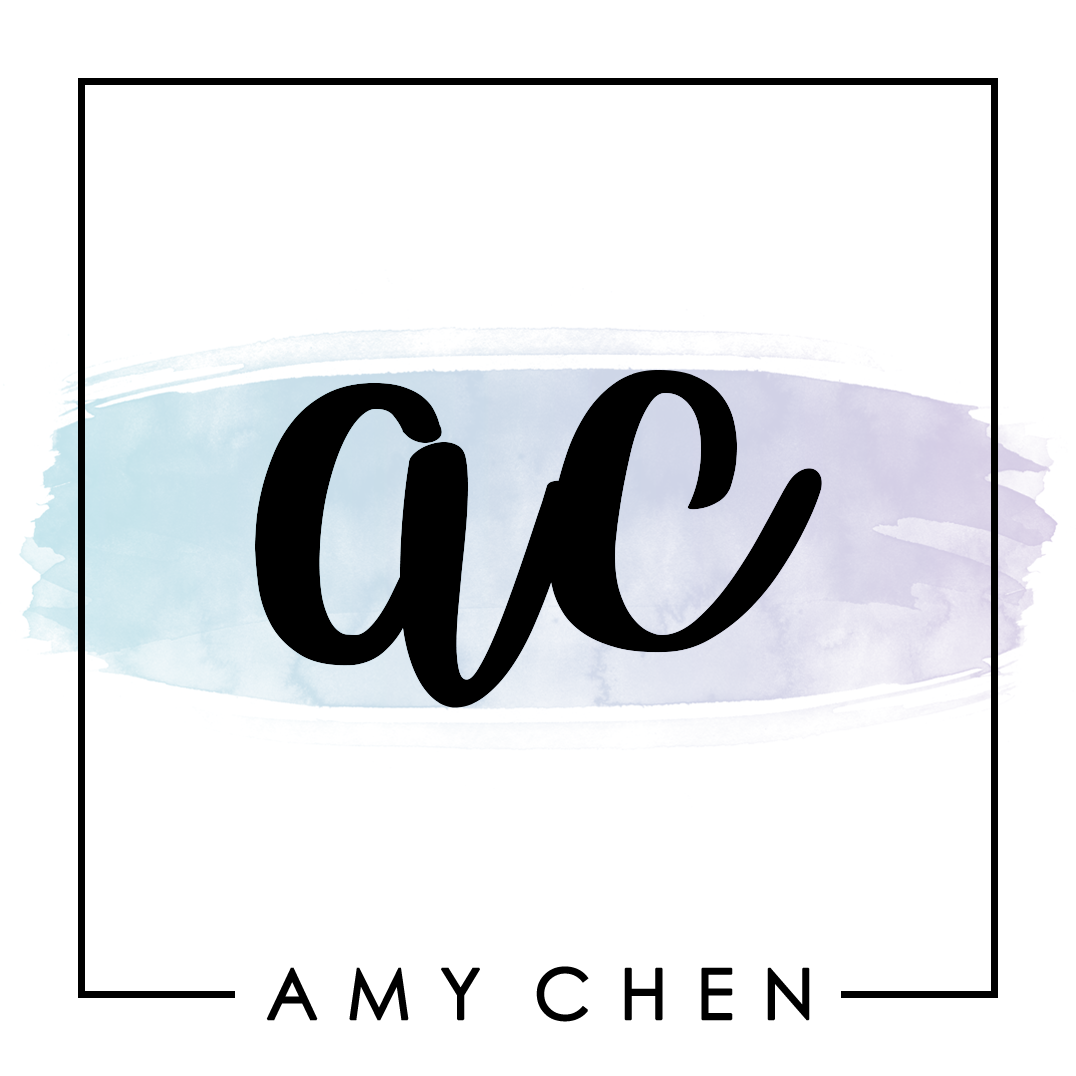
<style>
.page{position:relative;width:1076px;height:1076px;background:#ffffff}
.page>*{position:absolute;margin:0}
.t1{font:70px "CenturyGothic";letter-spacing:0.04em;color:#000000;text-transform:uppercase;font-weight:bold}
</style>
<div class="page">
<p class="t1" style="left:266px;top:966px;width:544px;height:56px">a m y  c h e n</p>
</div>
